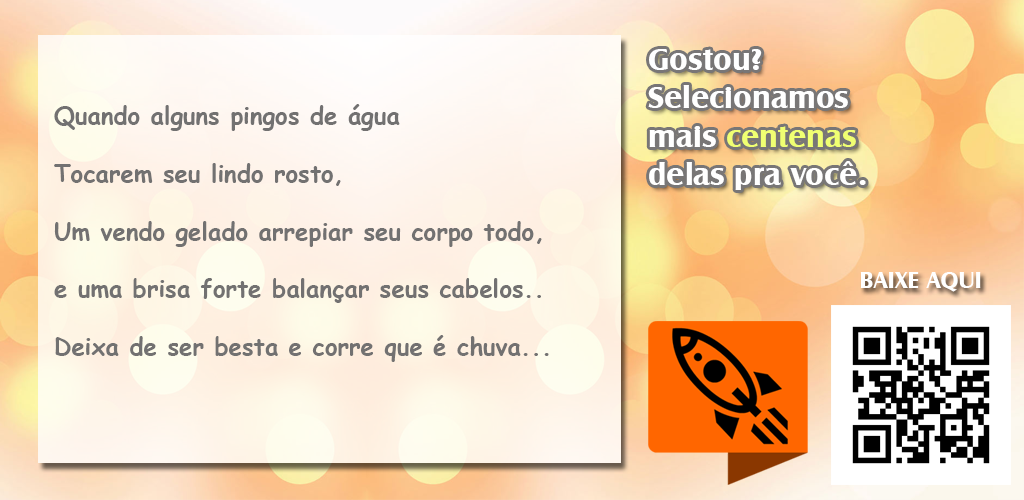
<style>
.page{position:relative;width:1024px;height:500px}
.page>*{position:absolute;margin:0}
.t1{font:32.1px "CastleT-Bold";color:#ffffff}
.t2{font:32.1px "CastleT-Bold";color:#f0ff72}
.t3{font:24px "ComicSansMS-Bold";color:#727171}
.t4{font:24px "CastleT-Bold";color:#ffffff}
</style>
<div class="page">
<p class="t1" style="left:648px;top:49px;width:218px;height:141px">Gostou?<br>Selecionamos <br>mais <span class="t2">centenas<br></span>delas pra você.</p>
<p class="t3" style="left:54px;top:104px;width:495px;height:258px">Quando alguns pingos de água<br><br>Tocarem seu lindo rosto,<br><br>Um vendo gelado arrepiar seu corpo todo,<br><br>e uma brisa forte balançar seus cabelos..<br><br>Deixa de ser besta e corre que é chuva...</p>
<p class="t4" style="left:860px;top:272px;width:121px;height:20px">BAIXE AQUI</p>
</div>
